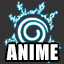
<style>
.page{position:relative;width:64px;height:64px;background:#333333}
.page>*{position:absolute;margin:0}
.t1{font:20px "Impact";letter-spacing:0.025em;color:#fdfdfd;text-transform:uppercase}
</style>
<div class="page">
<p class="t1" style="left:6px;top:44px;width:52px;height:16px">ANIME</p>
</div>
